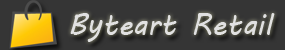
<style>
.page{position:relative;width:285px;height:50px;background:#353535}
.page>*{position:absolute;margin:0}
.t1{font:30px "MVBoli";color:#e2e2e2}
</style>
<div class="page">
<p class="t1" style="left:70px;top:13px;width:205px;height:29px">Byteart Retail</p>
</div>
